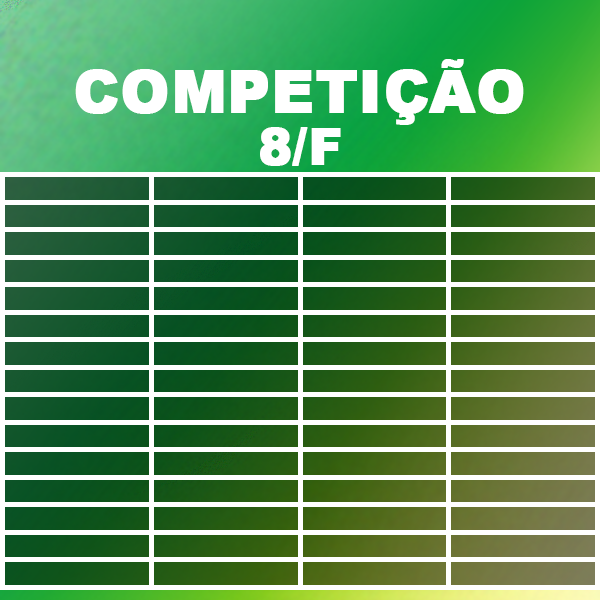
<style>
.page{position:relative;width:600px;height:600px}
.page>*{position:absolute;margin:0}
.t1{font:58.3px "Arial-Black";color:#ffffff;text-transform:uppercase;font-weight:bold}
.t2{font:50px "Arial-Black";color:#ffffff;text-transform:uppercase;font-weight:bold}
</style>
<div class="page">
<p class="t1" style="left:75px;top:59px;width:449px;height:66px">Competição</p>
<p class="t2" style="left:260px;top:127px;width:81px;height:39px">8/f</p>
</div>
